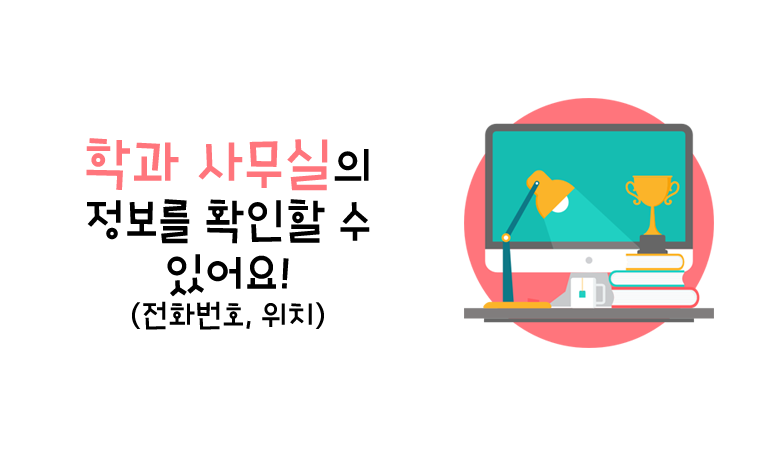
<style>
.page{position:relative;width:765px;height:454px;background:#ffffff}
.page>*{position:absolute;margin:0}
.t1{font:45px "HoonJungleR";color:#000000}
.t2{font:54px "HoonJungleR";color:#ff757c}
.t3{font:30px "HoonJungleR";color:#000000}
</style>
<div class="page">
<p class="t1" style="left:86px;top:138px;width:284px;height:192px;text-align:center"><span class="t2">학과 사무실</span>의 <br>정보를 확인할 수 있어요!<br><span class="t3">(전화번호, 위치)</span></p>
</div>
